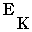
<style>
.page{position:relative;width:32px;height:32px;background:#ffffff}
.page>*{position:absolute;margin:0}
.t1{font:18px "BookmanOldStyle";color:#000000}
</style>
<div class="page">
<p class="t1" style="left:3px;top:3px;width:11px;height:12px">E</p>
<p class="t1" style="left:17px;top:17px;width:12px;height:12px">K</p>
</div>
